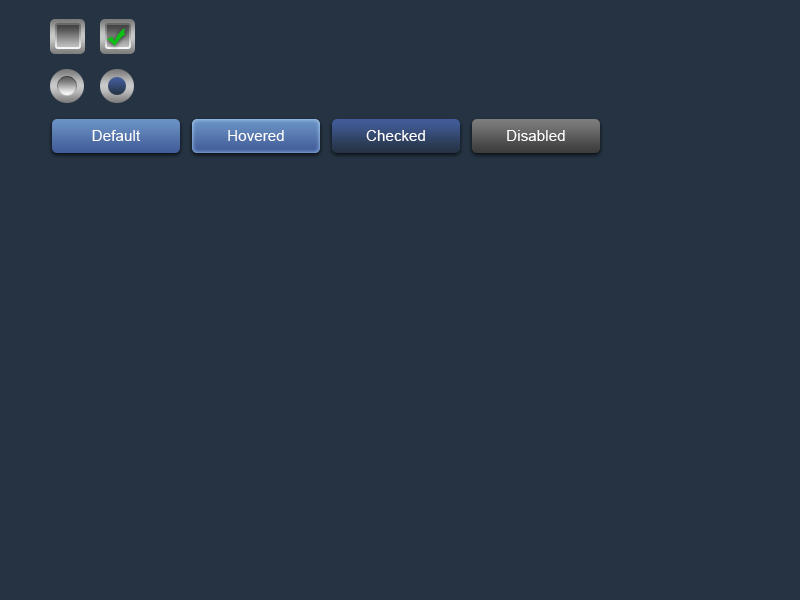
<style>
.page{position:relative;width:800px;height:600px;background:#253343}
.page>*{position:absolute;margin:0}
.t1{font:15.2px "ArialMT";color:#ffffff}
</style>
<div class="page">
<p class="t1" style="left:92px;top:130px;width:49px;height:11px">Default</p>
<p class="t1" style="left:228px;top:130px;width:56px;height:11px">Hovered</p>
<p class="t1" style="left:366px;top:130px;width:59px;height:11px">Checked</p>
<p class="t1" style="left:507px;top:130px;width:58px;height:11px">Disabled</p>
</div>
